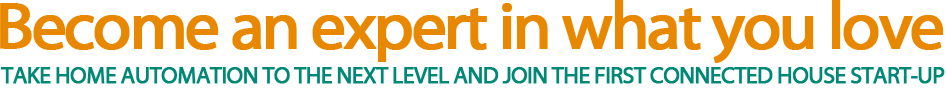
<style>
.page{position:relative;width:946px;height:96px;background:#ffffff}
.page>*{position:absolute;margin:0}
.t1{font:66.7px "MyriadWebPro";letter-spacing:-0.055em;color:#e88801;font-weight:bold}
.t2{font:23.3px "MyriadWebPro";letter-spacing:-0.055em;color:#008877;font-weight:bold}
</style>
<div class="page">
<p class="t1" style="left:0px;top:0px;width:944px;height:63px">Become an expert in what you love</p>
<p class="t2" style="left:1px;top:67px;width:944px;height:17px">TAKE HOME AUTOMATION TO THE NEXT LEVEL AND JOIN THE FIRST CONNECTED HOUSE START-UP</p>
</div>
